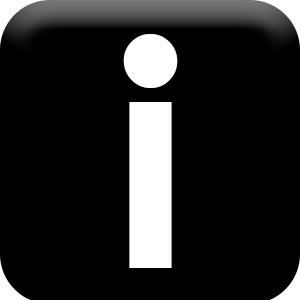
<style>
.page{position:relative;width:300px;height:300px;background:#000000}
.page>*{position:absolute;margin:0}
.t1{font:312.5px "CenturyGothic-Bold";color:#ffffff}
</style>
<div class="page">
<p class="t1" style="left:123px;top:34px;width:55px;height:234px">i</p>
</div>
